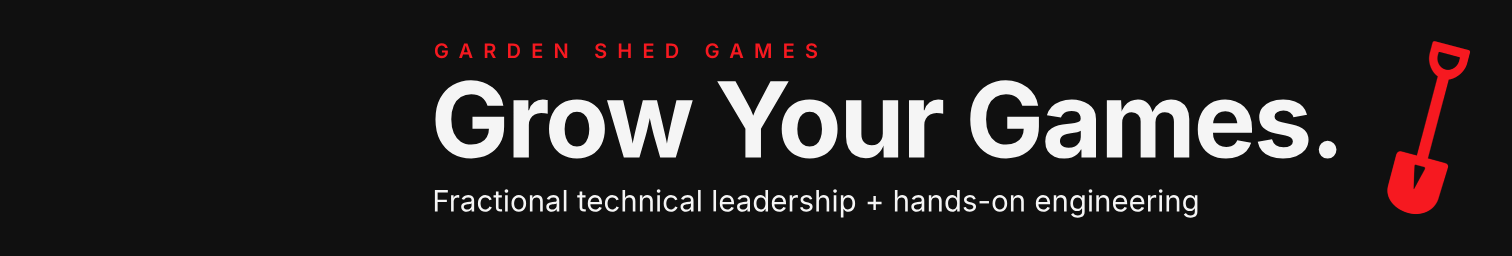
<style>
.page{position:relative;width:1512px;height:256px;background:#101010}
.page>*{position:absolute;margin:0}
.t1{font:20px "Inter-SemiBold";letter-spacing:0.51em;color:#f61920;text-transform:uppercase}
.t2{font:104.6px "Inter-Bold";letter-spacing:-0.021em;color:#f5f5f5}
.t3{font:29.4px "Inter-Regular_14.000opsz_400.000wght";color:#f5f5f5}
</style>
<div class="page">
<p class="t1" style="left:434px;top:43px;width:384px;height:16px">GARDEN SHED GAMES</p>
<p class="t2" style="left:435px;top:80px;width:902px;height:79px">Grow Your Games.</p>
<p class="t3" style="left:434px;top:189px;width:764px;height:29px">Fractional technical leadership + hands-on engineering</p>
</div>
